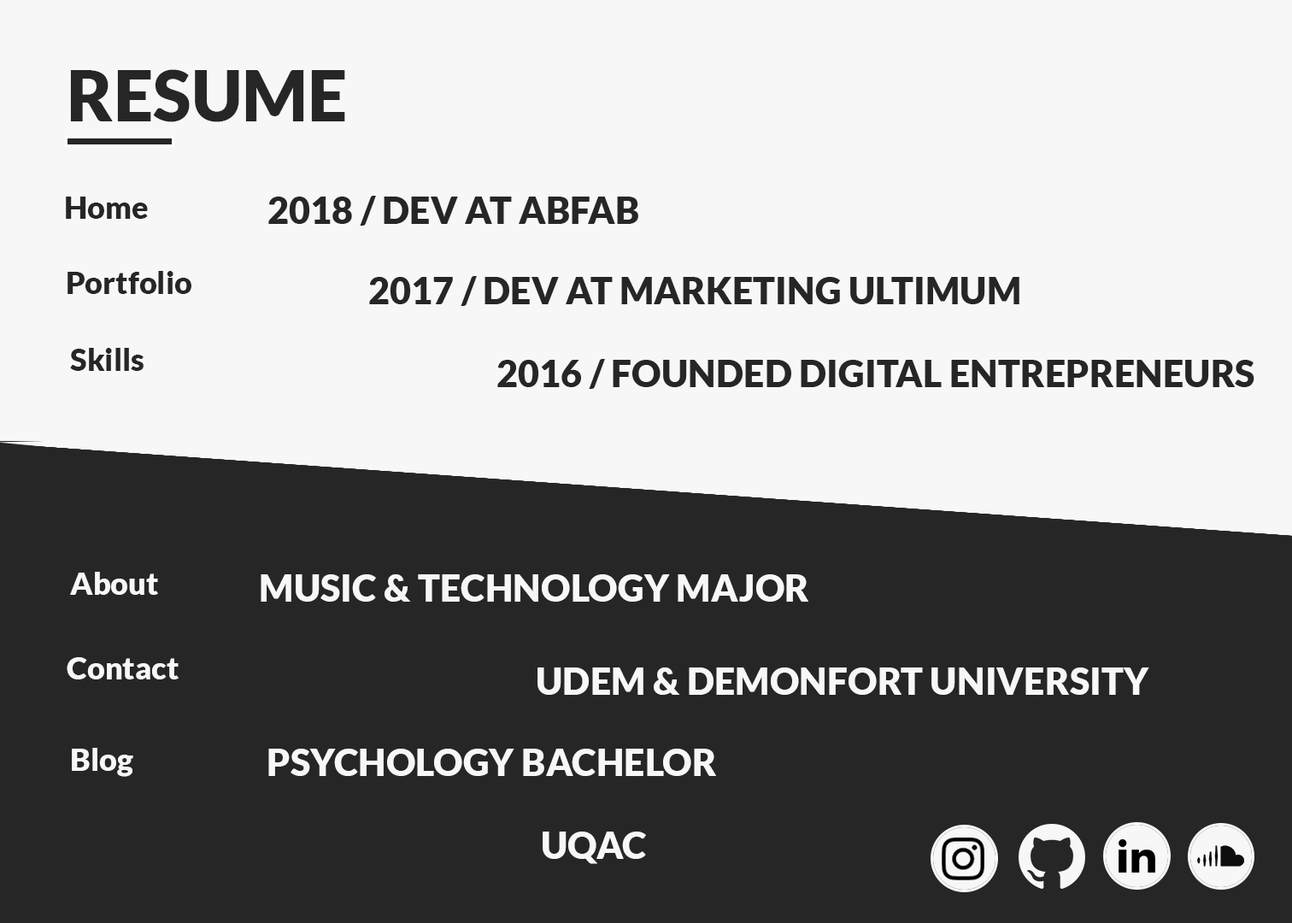
<style>
.page{position:relative;width:1292px;height:923px;background:#f7f7f7}
.page>*{position:absolute;margin:0}
.t1{font:70.5px "Lato-Black";color:#272626}
.t2{font:30.8px "Lato-Black";color:#272626}
.t3{font:36.9px "Lato-Black";color:#272626;text-transform:uppercase}
.t4{font:30.8px "Lato-Black";color:#f7f7f7}
.t5{font:36.9px "Lato-Black";color:#f7f7f7;text-transform:uppercase}
</style>
<div class="page">
<p class="t1" style="left:70px;top:69px;width:275px;height:53px">RESUME</p>
<p class="t2" style="left:66px;top:197px;width:82px;height:22px">Home</p>
<p class="t3" style="left:268px;top:196px;width:370px;height:30px">2018 / DEV AT ABFAB</p>
<p class="t2" style="left:68px;top:271px;width:123px;height:23px">Portfolio</p>
<p class="t3" style="left:369px;top:276px;width:650px;height:30px">2017 / DEV AT Marketing Ultimum</p>
<p class="t2" style="left:70px;top:348px;width:74px;height:23px">Skills</p>
<p class="t3" style="left:497px;top:359px;width:757px;height:30px">2016 / founded digital entrepreneurs</p>
<p class="t4" style="left:70px;top:572px;width:88px;height:23px">About</p>
<p class="t5" style="left:261px;top:574px;width:547px;height:28px">MUSIC &amp; TECHNOLOGY MAJOR</p>
<p class="t4" style="left:67px;top:657px;width:112px;height:22px">Contact</p>
<p class="t5" style="left:538px;top:667px;width:611px;height:28px">UDEM &amp; DEMONFORT UNIVERSITY</p>
<p class="t4" style="left:72px;top:748px;width:61px;height:29px">Blog</p>
<p class="t5" style="left:268px;top:749px;width:448px;height:27px">PSYCHOLOGY BACHELOR</p>
<p class="t5" style="left:543px;top:831px;width:103px;height:33px">UQAC</p>
</div>
